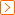
<style>
.page{position:relative;width:15px;height:15px;background:#ffffff}
.page>*{position:absolute;margin:0}
.t1{font:12px "LetterGothicStd";color:#ff6600;scale:1.05 1}
</style>
<div class="page">
<p class="t1" style="left:5px;top:3px;width:6px;height:9px">&gt;</p>
</div>
